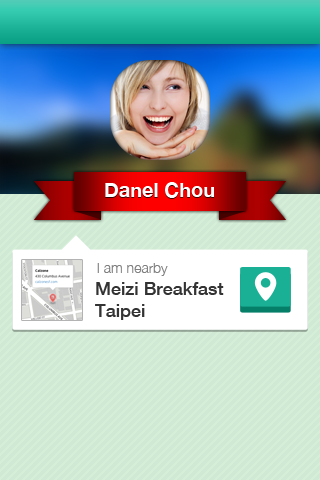
<style>
.page{position:relative;width:320px;height:480px;background:#d0e9d4}
.page>*{position:absolute;margin:0}
.t1{font:20px "HelveticaNeue-Bold";color:#ffffff}
.t2{font:14px "HelveticaNeue-Light";color:#808080}
.t3{font:18px "HelveticaNeue-Medium";color:#333333}
</style>
<div class="page">
<p class="t1" style="left:105px;top:182px;width:109px;height:16px">Danel Chou</p>
<p class="t2" style="left:97px;top:263px;width:71px;height:13px">I am nearby</p>
<p class="t3" style="left:95px;top:282px;width:129px;height:38px">Meizi Breakfast<br>Taipei</p>
</div>
